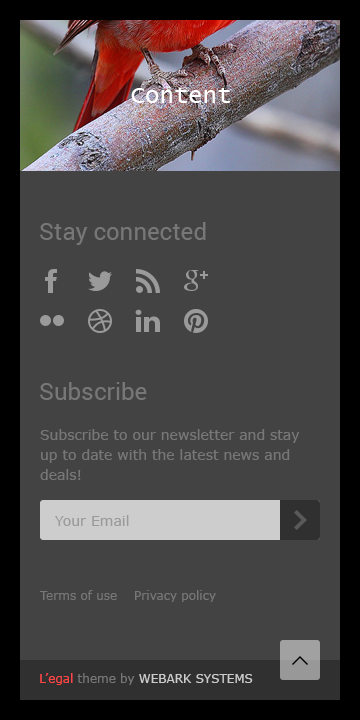
<style>
.page{position:relative;width:360px;height:720px;background:#434343}
.page>*{position:absolute;margin:0}
.t1{font:24px "LucidaConsole";color:#ffffff}
.t2{font:24px "Roboto-Regular";color:#777777}
.t3{font:14px/20px "Verdana";color:#777777}
.t4{font:14px "Verdana";color:#9a9a9a}
.t5{font:12px "Verdana";color:#777777}
.t6{font:12px "Verdana";color:#cccccc;text-transform:uppercase}
.t7{font:12px "Verdana";color:#ff4646}
</style>
<div class="page">
<p class="t1" style="left:131px;top:88px;width:99px;height:15px">Content</p>
<p class="t2" style="left:40px;top:222px;width:166px;height:23px">Stay connected</p>
<p class="t2" style="left:40px;top:382px;width:107px;height:18px">Subscribe</p>
<p class="t3" style="left:40px;top:429px;width:260px;height:51px">Subscribe to our newsletter and stay up to date with the latest news and deals!</p>
<p class="t4" style="left:55px;top:515px;width:74px;height:11px">Your Email</p>
<p class="t5" style="left:39px;top:590px;width:177px;height:12px">Terms of use    Privacy policy</p>
<p class="t6" style="left:40px;top:673px;width:213px;height:12px"><span class="t7">L’egal</span><span class="t5"> theme by </span>webark systems</p>
</div>
